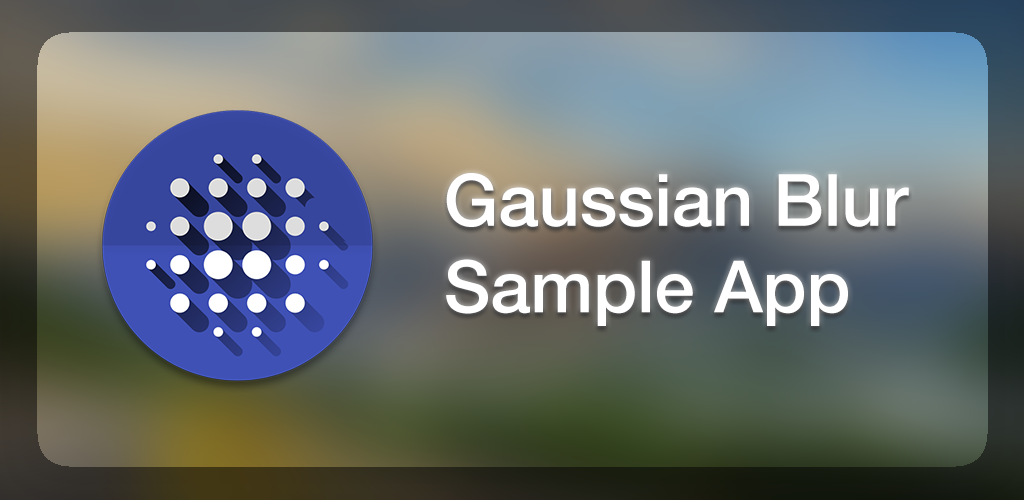
<style>
.page{position:relative;width:1024px;height:500px}
.page>*{position:absolute;margin:0}
.t1{font:72px "HelveticaNeue-Medium";color:#ffffff}
</style>
<div class="page">
<p class="t1" style="left:446px;top:173px;width:463px;height:153px">Gaussian Blur <br>Sample App</p>
</div>
